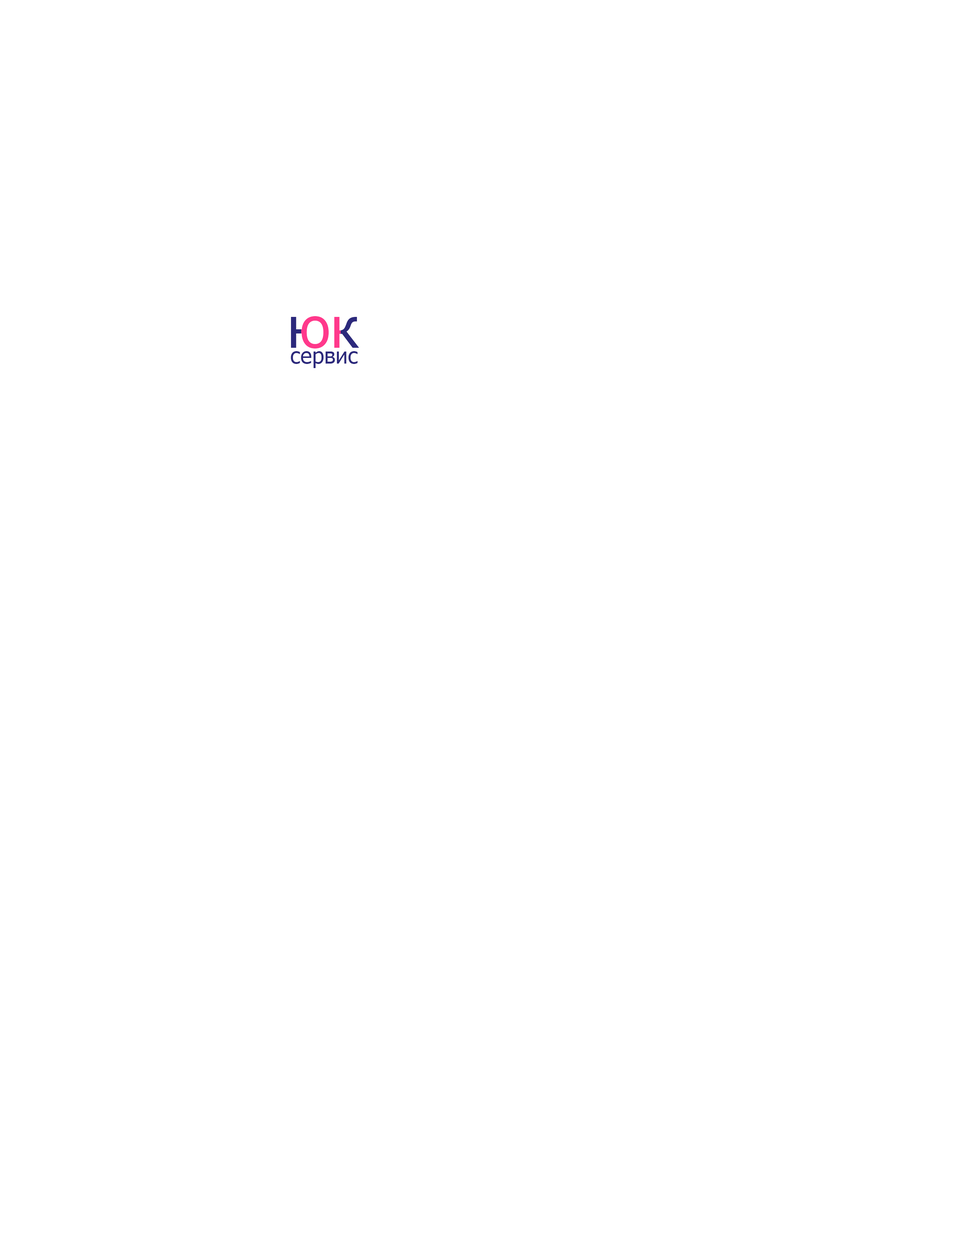
<style>
.page{position:relative;width:960px;height:1242px;background:#ffffff}
.page>*{position:absolute;margin:0}
.t1{font:56.5px "Tahoma"}
.t2{font:22px "Tahoma";color:#2c297c}
</style>
<div class="page">
<p class="t1" style="left:291px;top:316px;width:68px;height:33px">юк</p>
<p class="t2" style="left:291px;top:351px;width:67px;height:17px">сервис</p>
</div>
